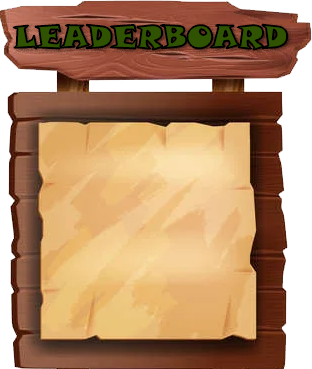
<style>
.page{position:relative;width:312px;height:369px}
.page>*{position:absolute;margin:0}
.t1{font:31px "SnapITC-Regular";color:#2f5300}
</style>
<div class="page">
<p class="t1" style="left:13px;top:24px;width:274px;height:26px">LEADERBOARD</p>
</div>
